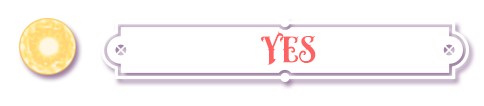
<style>
.page{position:relative;width:484px;height:106px;background:#ffffff}
.page>*{position:absolute;margin:0}
.t1{font:41.7px "Moyers";color:#ff6262}
</style>
<div class="page">
<p class="t1" style="left:261px;top:31px;width:55px;height:34px">YES</p>
</div>
